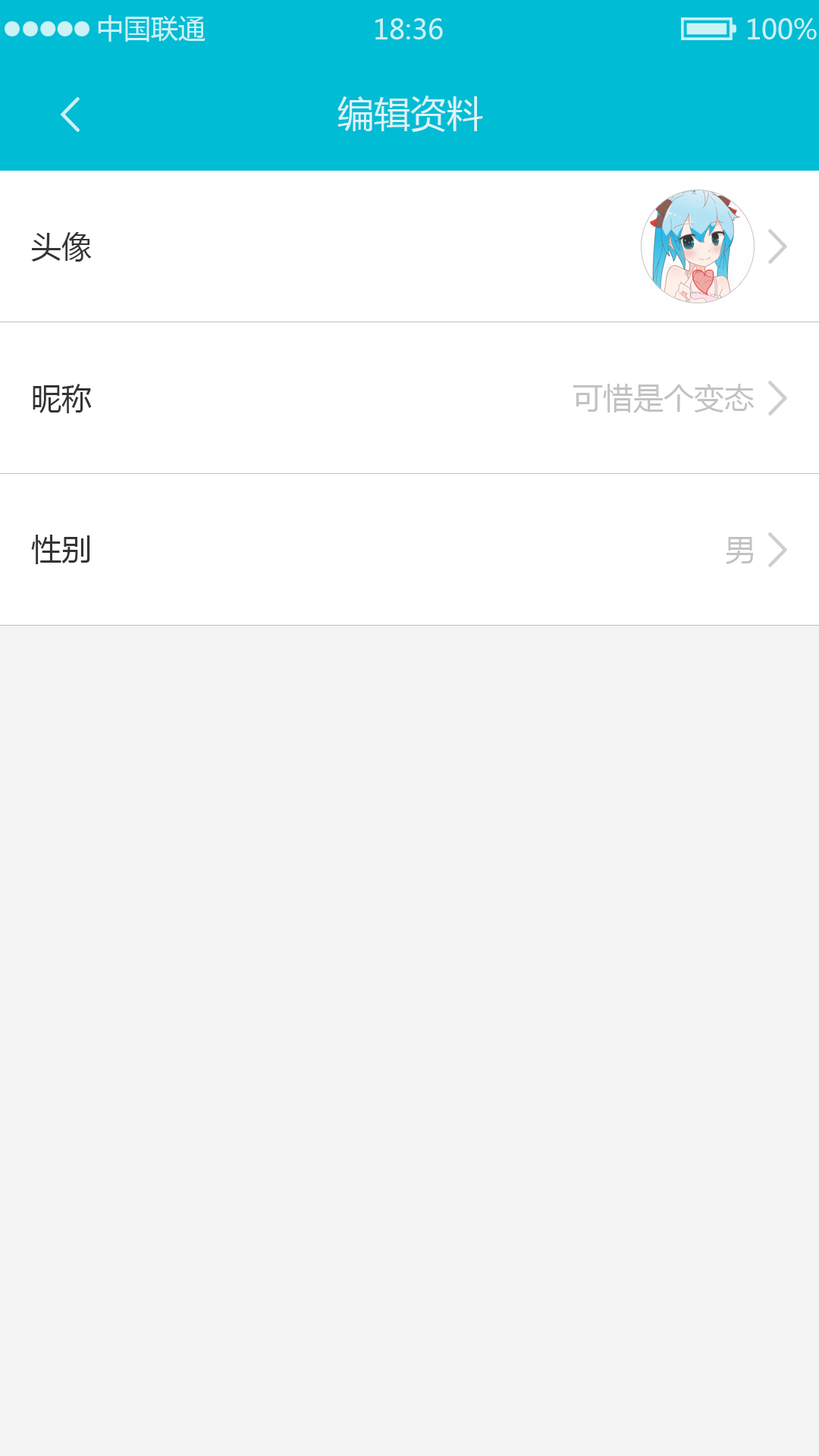
<style>
.page{position:relative;width:819px;height:1456px;background:#f3f3f3}
.page>*{position:absolute;margin:0}
.t1{font:27.3px "MicrosoftYaHei";color:#ccf2f6}
.t2{font:36.4px "MicrosoftYaHei";color:#ddf3f7}
.t3{font:30.3px "MicrosoftYaHei";color:#353434}
.t4{font:30.3px "MicrosoftYaHei";color:#c2c2c2}
</style>
<div class="page">
<p class="t1" style="left:98px;top:15px;width:108px;height:27px">中国联通</p>
<p class="t1" style="left:375px;top:18px;width:68px;height:21px">18:36</p>
<p class="t1" style="left:748px;top:18px;width:69px;height:21px">100%</p>
<p class="t2" style="left:337px;top:96px;width:146px;height:36px">编辑资料</p>
<p class="t3" style="left:31px;top:232px;width:61px;height:30px">头像</p>
<p class="t3" style="left:33px;top:384px;width:59px;height:29px">昵称</p>
<p class="t4" style="left:573px;top:384px;width:182px;height:29px">可惜是个变态</p>
<p class="t3" style="left:31px;top:535px;width:59px;height:29px">性别</p>
<p class="t4" style="left:726px;top:537px;width:28px;height:27px">男</p>
</div>
